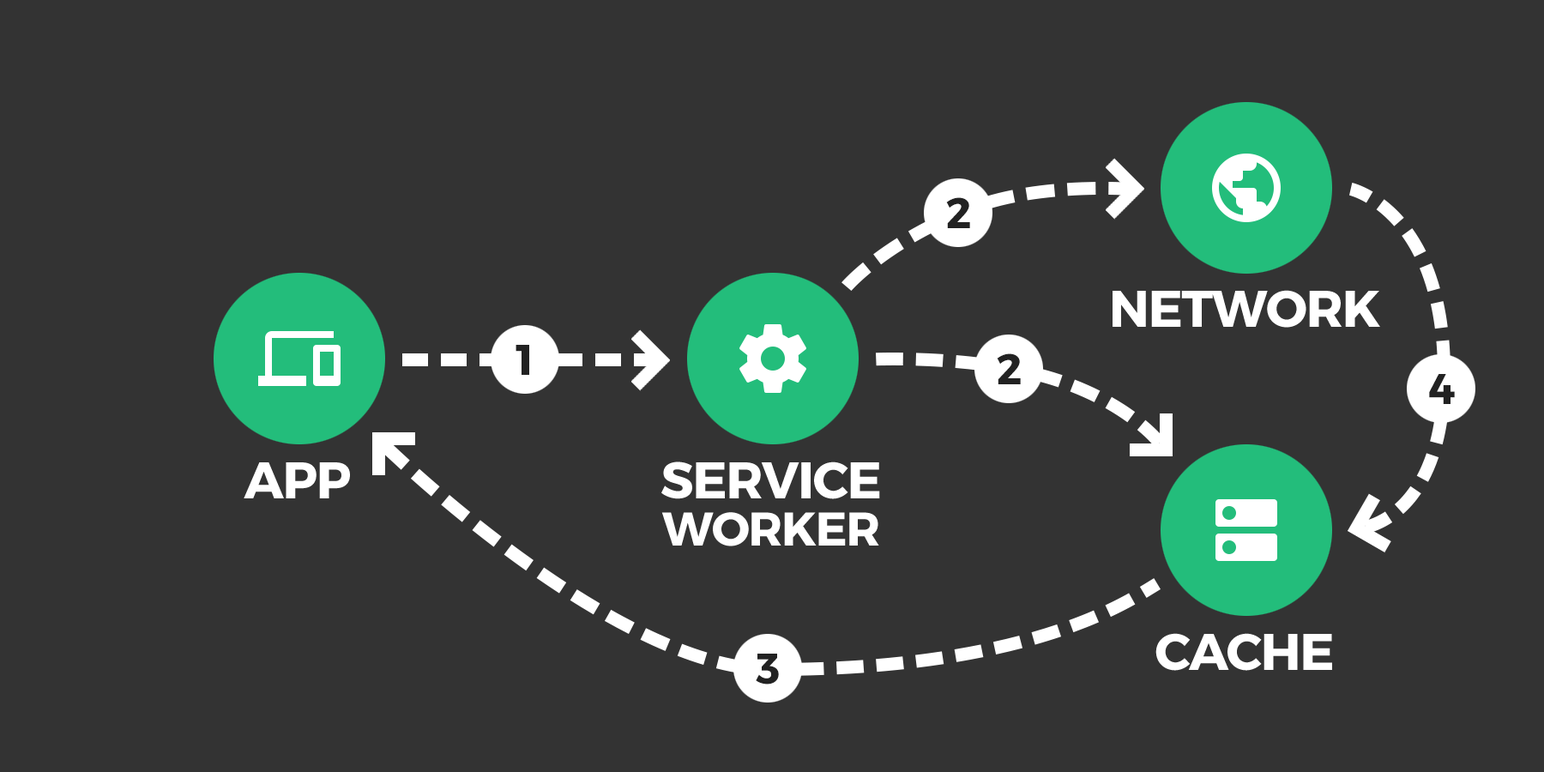
<style>
.page{position:relative;width:1544px;height:772px;background:#333333}
.page>*{position:absolute;margin:0}
.t1{font:42.9px "Montserrat-Bold";letter-spacing:-0.025em;color:#222222}
.t2{font:51.5px "Montserrat-Bold";letter-spacing:-0.025em;color:#ffffff}
.t3{font:51.5px/47.2px "Montserrat-Bold";letter-spacing:-0.025em;color:#ffffff}
.t4{font:47.2px/47.2px "Montserrat-Bold";letter-spacing:-0.025em;color:#ffffff}
</style>
<div class="page">
<p class="t1" style="left:946px;top:197px;width:24px;height:31px">2</p>
<p class="t2" style="left:1113px;top:290px;width:267px;height:38px">NETWORK</p>
<p class="t1" style="left:516px;top:345px;width:13px;height:30px">1</p>
<p class="t1" style="left:997px;top:353px;width:24px;height:31px">2</p>
<p class="t1" style="left:1429px;top:374px;width:26px;height:30px">4</p>
<p class="t3" style="left:661px;top:462px;width:219px;height:85px;text-align:center">SERVICE<br><span class="t4">WORKER</span></p>
<p class="t2" style="left:244px;top:462px;width:106px;height:36px">APP</p>
<p class="t2" style="left:1156px;top:633px;width:176px;height:38px">CACHE</p>
<p class="t1" style="left:756px;top:654px;width:23px;height:31px">3</p>
</div>
